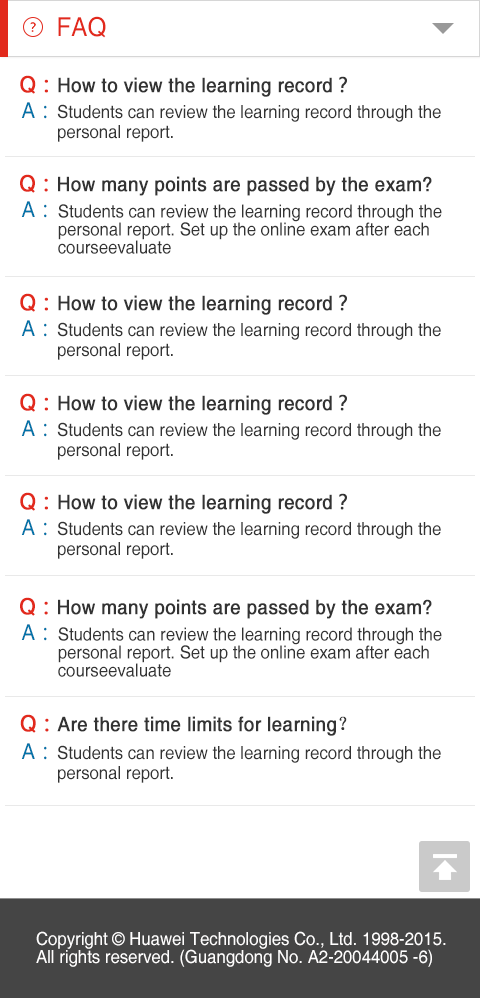
<style>
.page{position:relative;width:480px;height:998px;background:#ffffff}
.page>*{position:absolute;margin:0}
.t1{font:26px "Helvetica";color:#e2291c;scale:0.93 1}
.t2{font:20px "Helvetica";color:#333333;font-weight:bold;scale:0.93 1}
.t3{font:22px "Helvetica";color:#e2291c;font-weight:bold;scale:0.93 1}
.t4{font:22px "MicrosoftYaHei";color:#e2291c;font-weight:bold;scale:0.93 1}
.t5{font:20px "MicrosoftYaHei";color:#333333;font-weight:bold;scale:0.93 1}
.t6{font:22px "Helvetica";color:#0373a8;scale:0.93 1}
.t7{font:22px "MicrosoftYaHei";color:#0373a8;scale:0.93 1}
.t8{font:18px/20px "Helvetica";color:#333333;scale:0.93 1}
.t9{font:18px/18px "Helvetica";color:#333333;scale:0.93 1}
.t10{font:20px "SimSun";color:#333333;font-weight:bold;scale:0.93 1}
.t11{font:18px/18px "Helvetica";color:#fffefe;scale:0.93 1}
</style>
<div class="page">
<p class="t1" style="left:58px;top:16px;width:48px;height:22px">FAQ</p>
<p class="t2" style="left:20px;top:75px;width:327px;height:22px"><span class="t3">Q</span><span class="t4">：</span>How to view the learning record<span class="t5">？</span></p>
<p class="t6" style="left:21px;top:102px;width:26px;height:17px">A<span class="t7">：</span></p>
<p class="t8" style="left:57px;top:104px;width:384px;height:38px">Students can review the learning record through the <br>personal report.</p>
<p class="t2" style="left:20px;top:174px;width:412px;height:22px"><span class="t3">Q</span><span class="t4">：</span>How many points are passed by the exam?</p>
<p class="t6" style="left:21px;top:201px;width:26px;height:17px">A<span class="t7">：</span></p>
<p class="t9" style="left:58px;top:204px;width:384px;height:50px">Students can review the learning record through the <br>personal report. Set up the online exam after each <br>courseevaluate</p>
<p class="t2" style="left:20px;top:293px;width:327px;height:22px"><span class="t3">Q</span><span class="t4">：</span>How to view the learning record<span class="t5">？</span></p>
<p class="t6" style="left:21px;top:320px;width:26px;height:17px">A<span class="t7">：</span></p>
<p class="t8" style="left:57px;top:322px;width:384px;height:38px">Students can review the learning record through the <br>personal report.</p>
<p class="t2" style="left:20px;top:393px;width:327px;height:22px"><span class="t3">Q</span><span class="t4">：</span>How to view the learning record<span class="t5">？</span></p>
<p class="t6" style="left:21px;top:420px;width:26px;height:17px">A<span class="t7">：</span></p>
<p class="t8" style="left:57px;top:422px;width:384px;height:38px">Students can review the learning record through the <br>personal report.</p>
<p class="t2" style="left:20px;top:492px;width:327px;height:22px"><span class="t3">Q</span><span class="t4">：</span>How to view the learning record<span class="t5">？</span></p>
<p class="t6" style="left:21px;top:519px;width:26px;height:17px">A<span class="t7">：</span></p>
<p class="t8" style="left:57px;top:521px;width:384px;height:38px">Students can review the learning record through the <br>personal report.</p>
<p class="t2" style="left:20px;top:597px;width:412px;height:22px"><span class="t3">Q</span><span class="t4">：</span>How many points are passed by the exam?</p>
<p class="t6" style="left:21px;top:624px;width:26px;height:17px">A<span class="t7">：</span></p>
<p class="t9" style="left:58px;top:627px;width:384px;height:50px">Students can review the learning record through the <br>personal report. Set up the online exam after each <br>courseevaluate</p>
<p class="t2" style="left:20px;top:714px;width:327px;height:22px"><span class="t3">Q</span><span class="t4">：</span>Are there time limits for learning<span class="t10">？</span></p>
<p class="t6" style="left:21px;top:743px;width:26px;height:17px">A<span class="t7">：</span></p>
<p class="t8" style="left:57px;top:745px;width:384px;height:38px">Students can review the learning record through the <br>personal report.</p>
<p class="t11" style="left:36px;top:931px;width:410px;height:36px">Copyright © Huawei Technologies Co., Ltd. 1998-2015. <br>All rights reserved. (Guangdong No. A2-20044005 -6)</p>
</div>
